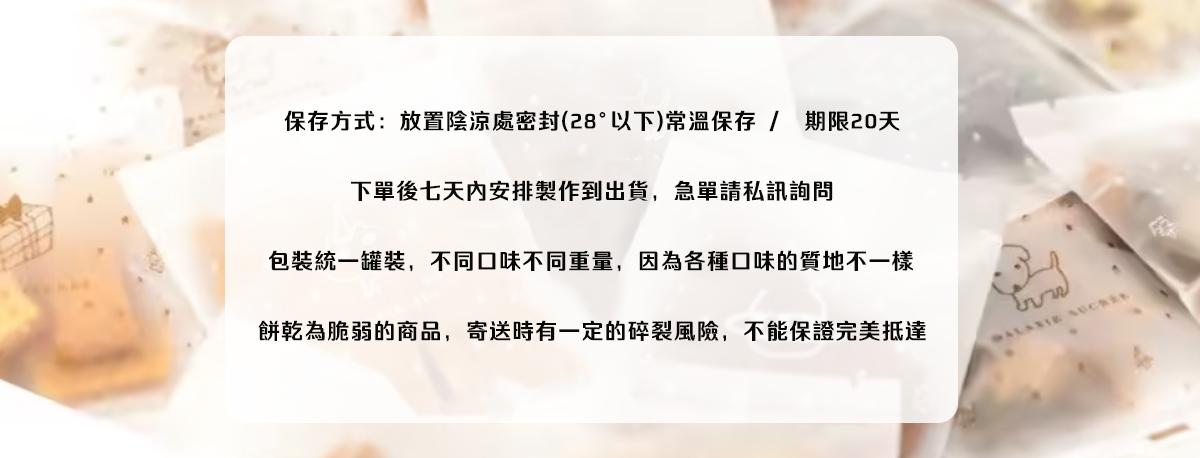
<style>
.page{position:relative;width:1200px;height:458px}
.page>*{position:absolute;margin:0}
.t1{font:22px "TensentypeRuiHeiGB18030-W4";letter-spacing:0.05em;color:#080807}
</style>
<div class="page">
<p class="t1" style="left:284px;top:110px;width:616px;height:22px">保存方式：放置陰涼處密封(28°以下)常溫保存 /  期限20天</p>
<p class="t1" style="left:351px;top:180px;width:482px;height:22px">下單後七天內安排製作到出貨，急單請私訊詢問</p>
<p class="t1" style="left:269px;top:250px;width:644px;height:22px">包裝統一罐裝，不同口味不同重量，因為各種口味的質地不一樣</p>
<p class="t1" style="left:258px;top:320px;width:668px;height:22px">餅乾為脆弱的商品，寄送時有一定的碎裂風險，不能保證完美抵達</p>
</div>
